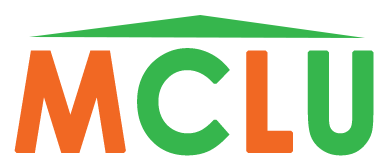
<style>
.page{position:relative;width:392px;height:168px;background:#ffffff}
.page>*{position:absolute;margin:0}
.t1{font:137.2px "CenturyGothic-Bold";letter-spacing:0.02em;color:#f16823;font-weight:bold;scale:0.93 1}
.t2{font:137.2px "CenturyGothic-Bold";letter-spacing:0.02em;color:#36b64d;font-weight:bold;scale:0.93 1}
</style>
<div class="page">
<p class="t1" style="left:14px;top:48px;width:360px;height:108px">M<span class="t2">C</span>L<span class="t2">U</span></p>
</div>
